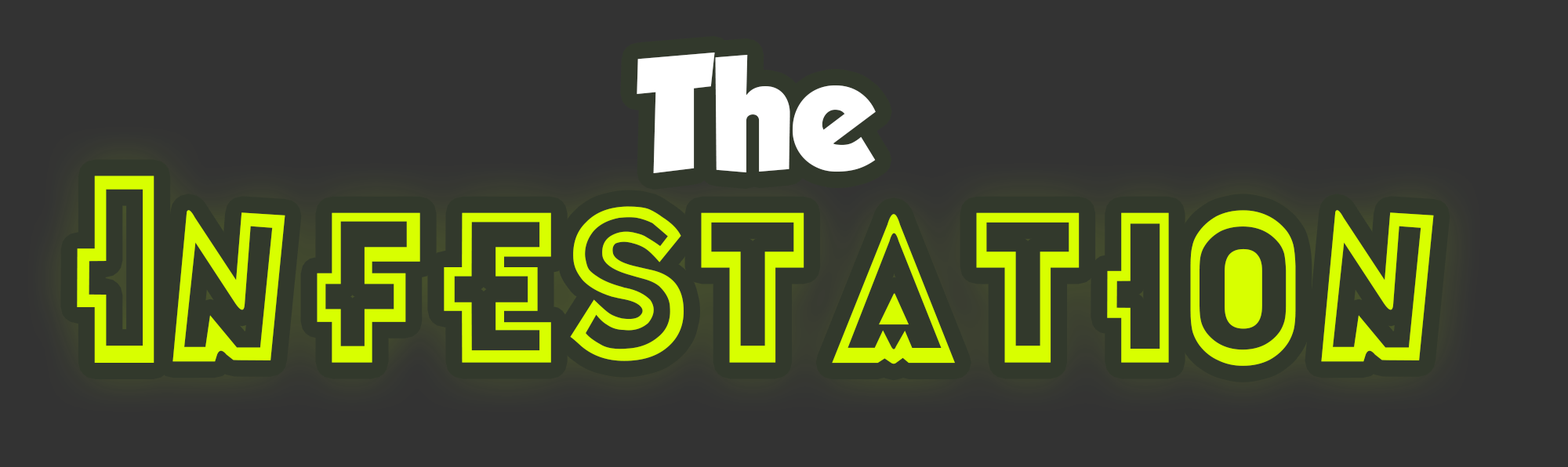
<style>
.page{position:relative;width:1568px;height:467px;background:#333333}
.page>*{position:absolute;margin:0}
.t1{font:141.8px "GROBOLD";color:#ffffff}
.t2{font:205.5px "Futurama-Title-Font-Regular";color:#d8ff00}
</style>
<div class="page">
<p class="t1" style="left:637px;top:53px;width:239px;height:120px">The</p>
<p class="t2" style="left:77px;top:176px;width:1357px;height:190px">Infestation</p>
</div>
